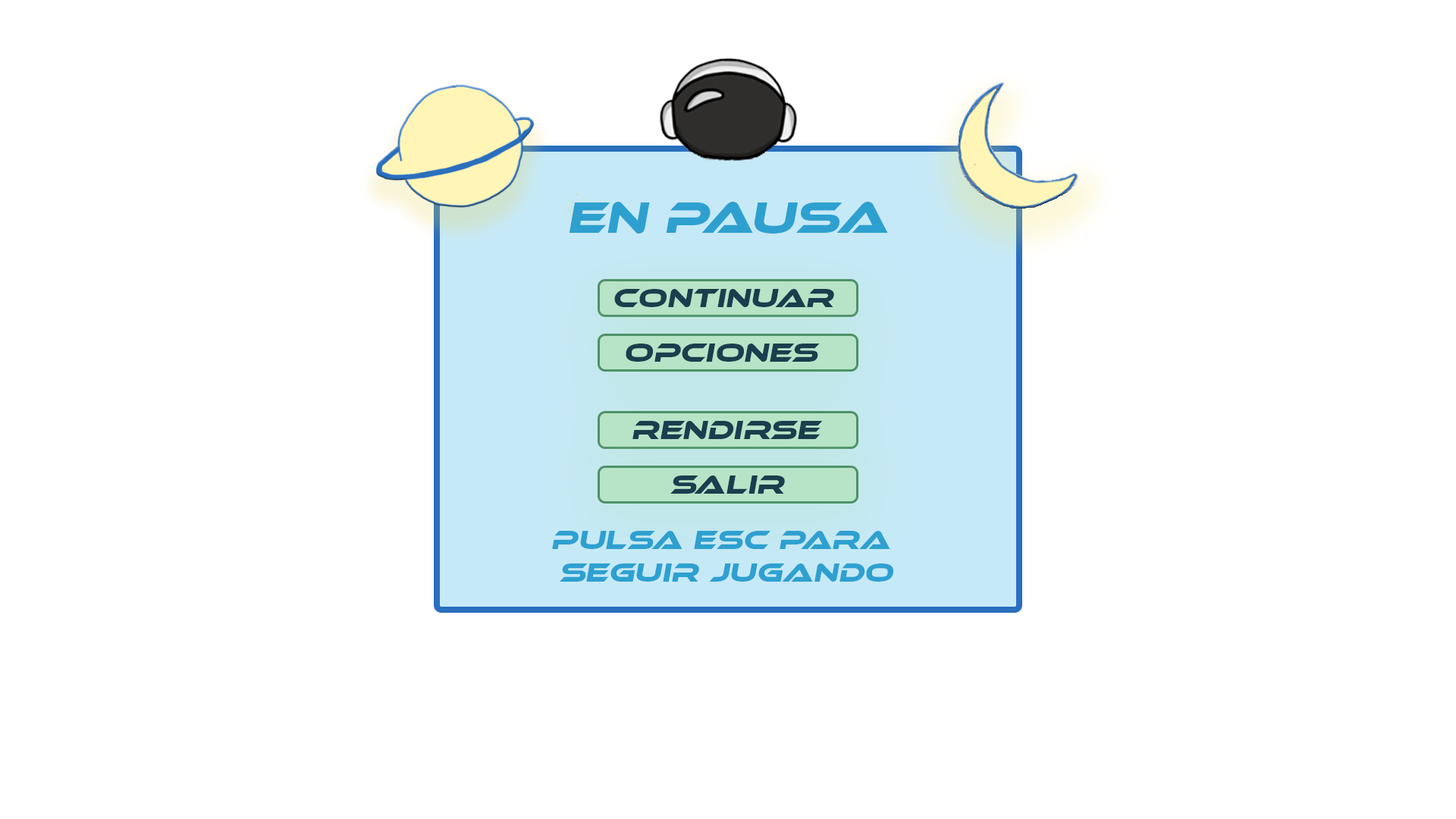
<style>
.page{position:relative;width:1456px;height:819px;background:#ffffff}
.page>*{position:absolute;margin:0}
.t1{font:45.5px "EthnocentricRg-Italic";color:#2ea0d0}
.t2{font:27.3px "EthnocentricRg-Italic";color:#1a3e4d}
.t3{font:27.3px "EthnocentricRg-Italic";color:#2ea0d0}
</style>
<div class="page">
<p class="t1" style="left:569px;top:202px;width:319px;height:32px">EN PAUSA</p>
<p class="t2" style="left:614px;top:289px;width:220px;height:18px">Continuar</p>
<p class="t2" style="left:626px;top:344px;width:194px;height:18px">opciones</p>
<p class="t2" style="left:632px;top:421px;width:191px;height:18px">rendirse</p>
<p class="t2" style="left:670px;top:475px;width:115px;height:19px">salir</p>
<p class="t3" style="left:552px;top:531px;width:341px;height:51px;text-align:center">Pulsa Esc para <br>seguir jugando</p>
</div>
